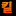
<style>
.page{position:relative;width:16px;height:16px;background:#000000}
.page>*{position:absolute;margin:0}
.t1{font:12px "MalgunGothicBold";font-weight:bold}
</style>
<div class="page">
<p class="t1" style="left:1px;top:1px;width:11px;height:12px">킬</p>
</div>
